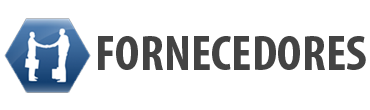
<style>
.page{position:relative;width:370px;height:110px;background:#ffffff}
.page>*{position:absolute;margin:0}
.t1{font:49.7px "MyriadPro-BoldCond";color:#434343;scale:1.04 1}
</style>
<div class="page">
<p class="t1" style="left:98px;top:36px;width:268px;height:34px">FORNECEDORES</p>
</div>
